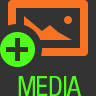
<style>
.page{position:relative;width:96px;height:96px;background:#333333}
.page>*{position:absolute;margin:0}
.t1{font:28px "HelveticaNeueLTStd-Cn";letter-spacing:-0.025em;color:#50ff1a;text-transform:uppercase}
</style>
<div class="page">
<p class="t1" style="left:18px;top:76px;width:63px;height:20px">MEDIA</p>
</div>
